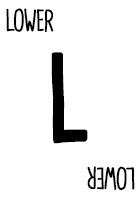
<style>
.page{position:relative;width:140px;height:200px;background:#ffffff}
.page>*{position:absolute;margin:0}
.t1{font:28.7px "CardenioModern-Reg";letter-spacing:-0.05em;color:#000000;text-transform:uppercase;font-weight:bold;scale:0.87 1}
.t2{font:115px "CardenioModern-Bold";letter-spacing:-0.1em;color:#000000;text-transform:uppercase;font-weight:bold;scale:0.87 1}
</style>
<div class="page">
<p class="t1" style="left:6px;top:8px;width:48px;height:24px">lower</p>
<p class="t2" style="left:51px;top:52px;width:37px;height:92px">L</p>
<p class="t1" style="left:87px;top:166px;width:48px;height:25px;rotate:180deg">lower</p>
</div>
